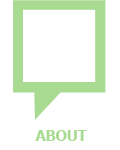
<style>
.page{position:relative;width:120px;height:150px;background:#ffffff}
.page>*{position:absolute;margin:0}
.t1{font:14.6px "Tahoma-Bold";color:#a9da92}
</style>
<div class="page">
<p class="t1" style="left:35px;top:130px;width:52px;height:11px">ABOUT</p>
</div>
